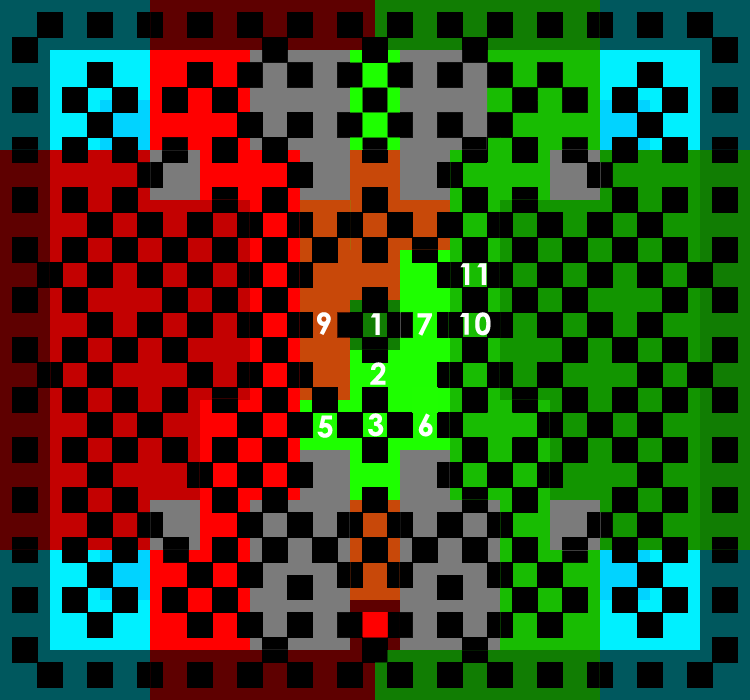
<style>
.page{position:relative;width:750px;height:700px;background:#000000}
.page>*{position:absolute;margin:0}
.t1{font:30px "CenturyGothic-Bold";color:#ffffff}
</style>
<div class="page">
<p class="t1" style="left:460px;top:263px;width:27px;height:22px">11</p>
<p class="t1" style="left:317px;top:312px;width:14px;height:23px">9</p>
<p class="t1" style="left:371px;top:313px;width:9px;height:22px">1</p>
<p class="t1" style="left:417px;top:313px;width:15px;height:23px">7</p>
<p class="t1" style="left:460px;top:312px;width:31px;height:24px">10</p>
<p class="t1" style="left:370px;top:362px;width:16px;height:23px">2</p>
<p class="t1" style="left:368px;top:413px;width:16px;height:24px">3</p>
<p class="t1" style="left:418px;top:413px;width:15px;height:24px">6</p>
</div>
